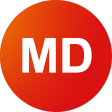
<style>
.page{position:relative;width:112px;height:112px;background:#ffffff}
.page>*{position:absolute;margin:0}
.t1{font:48px "Arial-BoldMT";color:#ffffff}
</style>
<div class="page">
<p class="t1" style="left:22px;top:38px;width:70px;height:35px">MD</p>
</div>
